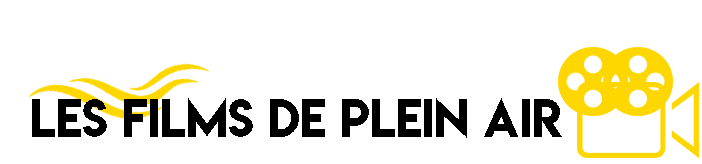
<style>
.page{position:relative;width:702px;height:164px;background:#ffffff}
.page>*{position:absolute;margin:0}
.t1{font:48px "LemonMilk";color:#000000}
</style>
<div class="page">
<p class="t1" style="left:32px;top:98px;width:530px;height:40px">Les Films de Plein Air</p>
</div>
